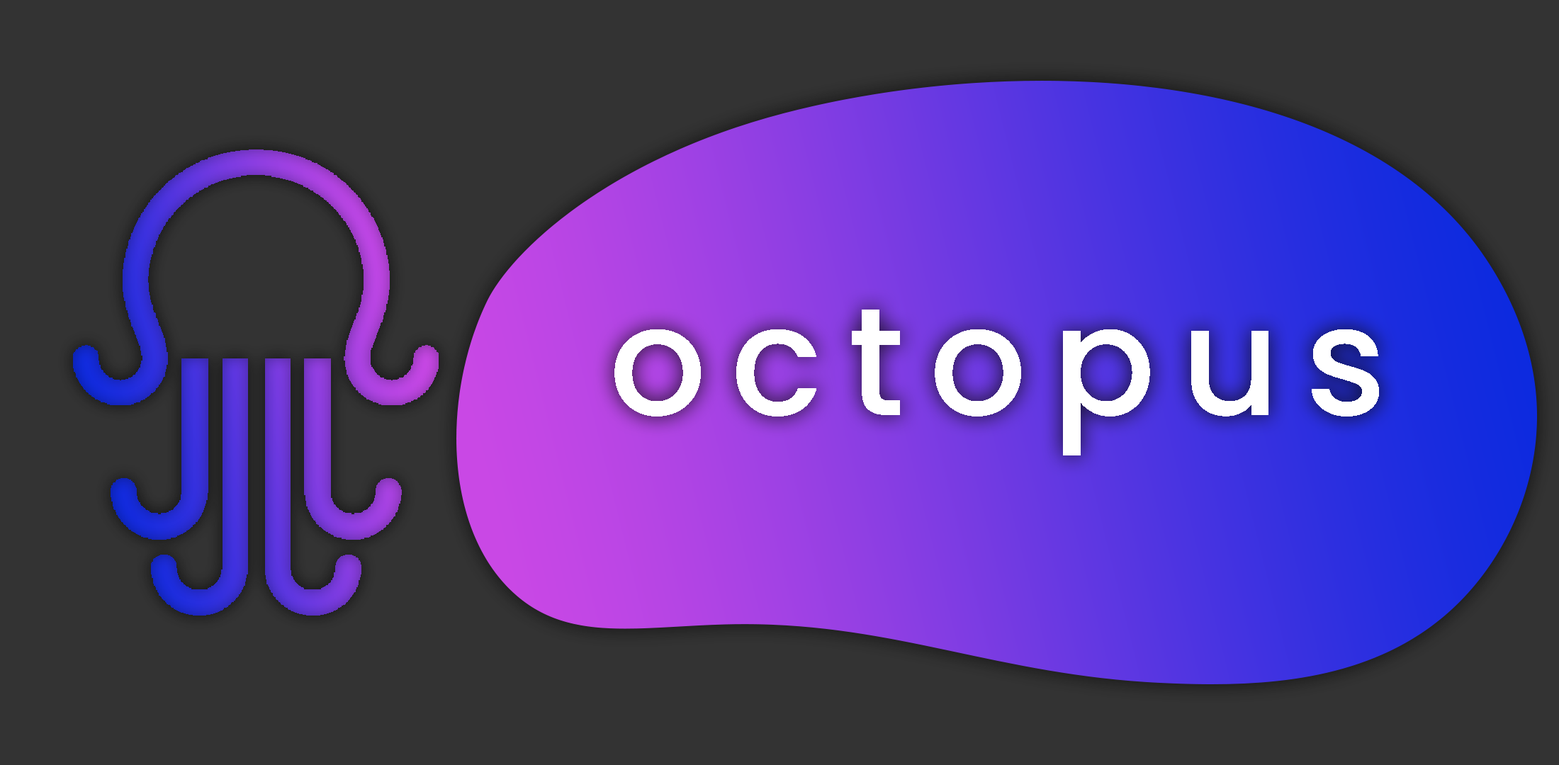
<style>
.page{position:relative;width:1559px;height:765px;background:#333333}
.page>*{position:absolute;margin:0}
.t1{font:153.5px "Poppins-Medium";letter-spacing:0.16em;color:#ffffff}
</style>
<div class="page">
<p class="t1" style="left:614px;top:310px;width:765px;height:146px">octopus</p>
</div>
